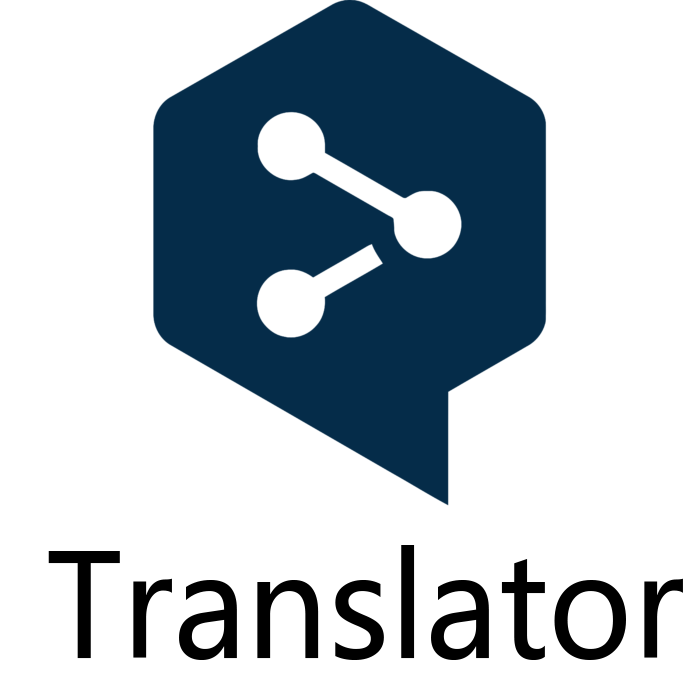
<style>
.page{position:relative;width:700px;height:699px;background:#ffffff}
.page>*{position:absolute;margin:0}
.t1{font:140.5px "MicrosoftYaHei";color:#000000;scale:0.95 1}
</style>
<div class="page">
<p class="t1" style="left:48px;top:545px;width:635px;height:115px">Translator</p>
</div>
